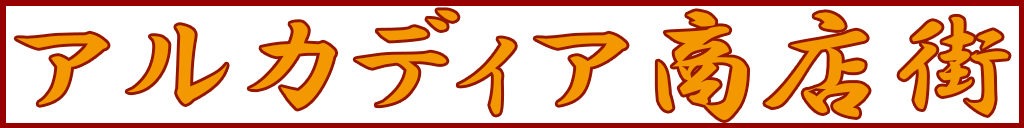
<style>
.page{position:relative;width:1024px;height:128px;background:#ffffff}
.page>*{position:absolute;margin:0}
.t1{font:127.4px "HGPGyoshotai";color:#f39800}
</style>
<div class="page">
<p class="t1" style="left:16px;top:10px;width:993px;height:110px">アルカディア商店街</p>
</div>
